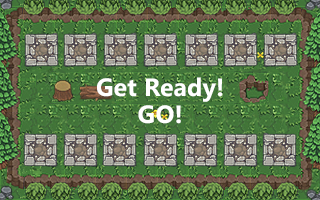
<style>
.page{position:relative;width:320px;height:200px}
.page>*{position:absolute;margin:0}
.t1{font:25px "MicrosoftPhagsPa-Bold";color:#ffffff}
</style>
<div class="page">
<p class="t1" style="left:97px;top:77px;width:126px;height:25px">Get Ready!</p>
<p class="t1" style="left:138px;top:105px;width:43px;height:19px">GO!</p>
</div>
